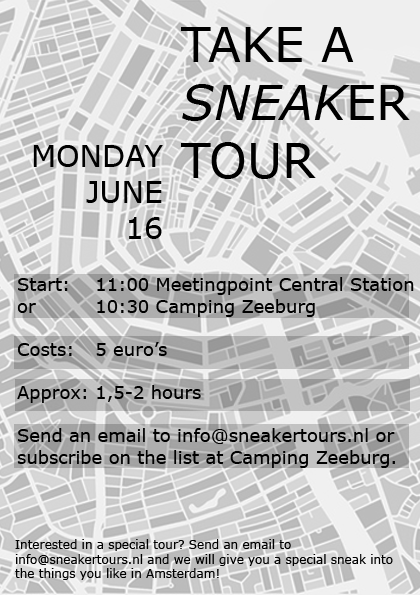
<style>
.page{position:relative;width:420px;height:595px}
.page>*{position:absolute;margin:0}
.t1{font:30px "Verdana";color:#000000}
.t2{font:18px "Verdana";color:#000000}
.t3{font:12px "Verdana";color:#000000}
</style>
<div class="page">
<p class="t1" style="left:33px;top:145px;width:130px;height:94px;text-align:right">MONDAY<br>JUNE<br>16</p>
<p class="t2" style="left:17px;top:277px;width:397px;height:191px">Start:  11:00 Meetingpoint Central Station<br>or   10:30 Camping Zeeburg<br><br>Costs:   5 euro’s<br><br>Approx: 1,5-2 hours<br><br>Send an email to info@sneakertours.nl or <br>subscribe on the list at Camping Zeeburg.</p>
<p class="t3" style="left:15px;top:539px;width:378px;height:41px">Interested in a special tour? Send an email to info@sneakertours.nl and we will give you a special sneak into the things you like in Amsterdam!</p>
</div>
